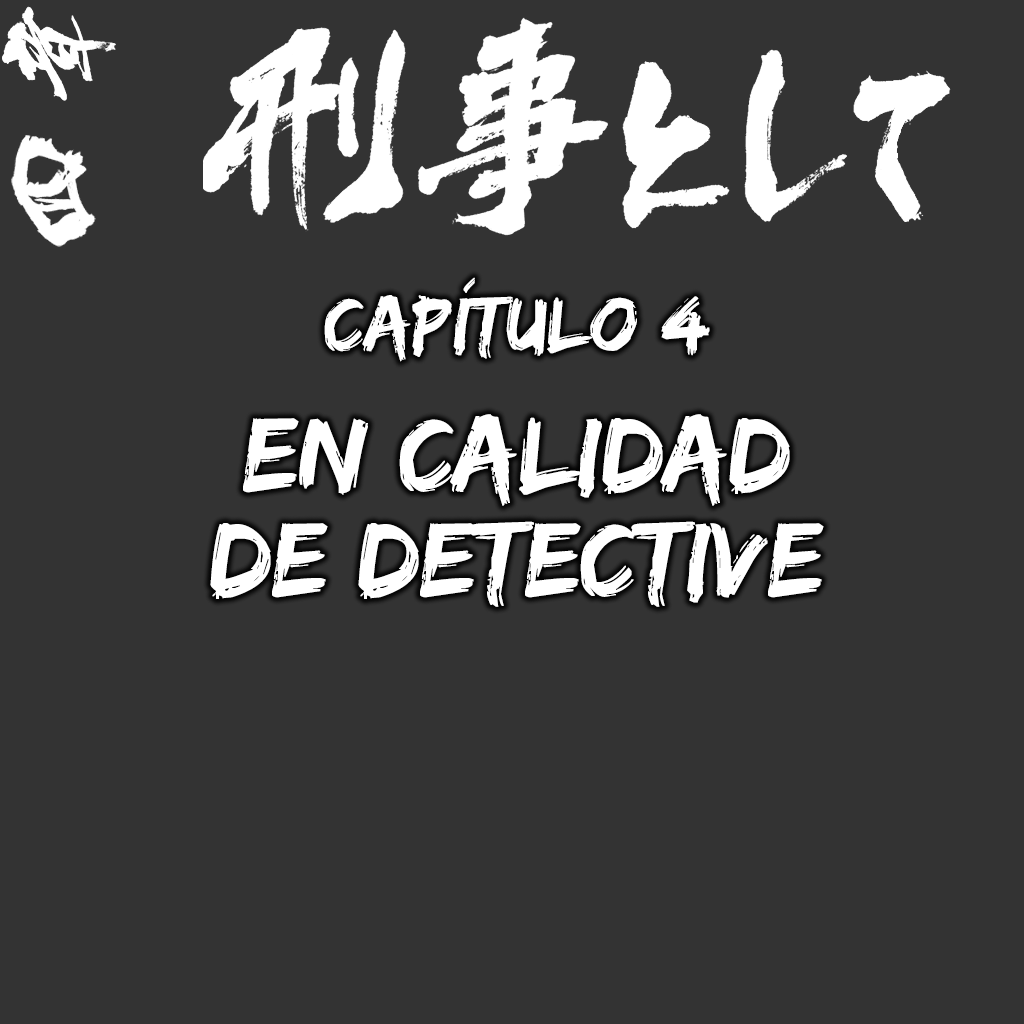
<style>
.page{position:relative;width:1024px;height:1024px;background:#333333}
.page>*{position:absolute;margin:0}
.t1{font:80px "EdoSZ";color:#ffffff}
.t2{font:109.9px/105.8px "EdoSZ";color:#ffffff}
</style>
<div class="page">
<p class="t1" style="left:324px;top:277px;width:386px;height:85px">Capítulo 4</p>
<p class="t2" style="left:210px;top:414px;width:614px;height:193px;text-align:center">En calidad<br>de detective</p>
</div>
